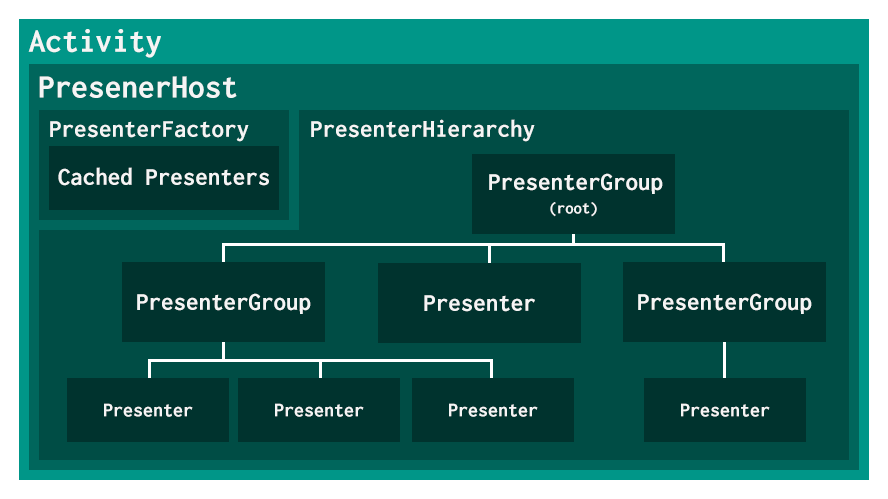
<style>
.page{position:relative;width:888px;height:499px;background:#004d45}
.page>*{position:absolute;margin:0}
.t1{font:33.3px "Inconsolata-Bold";color:#f5f5f5}
.t2{font:25px "Inconsolata-Bold";color:#f5f5f5}
.t3{font:16.7px "Inconsolata-Bold";color:#f5f5f5}
.t4{font:19.9px "Inconsolata-Bold";color:#f5f5f5}
</style>
<div class="page">
<p class="t1" style="left:28px;top:29px;width:133px;height:29px">Activity</p>
<p class="t1" style="left:39px;top:76px;width:198px;height:22px">PresenerHost</p>
<p class="t2" style="left:50px;top:121px;width:199px;height:21px">PresenterFactory</p>
<p class="t2" style="left:311px;top:119px;width:224px;height:23px">PresenterHierarchy</p>
<p class="t2" style="left:58px;top:167px;width:211px;height:19px">Cached Presenters</p>
<p class="t2" style="left:489px;top:173px;width:174px;height:21px">PresenterGroup</p>
<p class="t3" style="left:550px;top:202px;width:47px;height:15px">(root)</p>
<p class="t2" style="left:137px;top:293px;width:174px;height:21px">PresenterGroup</p>
<p class="t2" style="left:638px;top:293px;width:174px;height:21px">PresenterGroup</p>
<p class="t2" style="left:424px;top:295px;width:111px;height:17px">Presenter</p>
<p class="t4" style="left:104px;top:403px;width:89px;height:14px">Presenter</p>
<p class="t4" style="left:275px;top:403px;width:89px;height:14px">Presenter</p>
<p class="t4" style="left:449px;top:403px;width:89px;height:14px">Presenter</p>
<p class="t4" style="left:681px;top:403px;width:89px;height:14px">Presenter</p>
</div>
